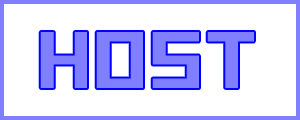
<style>
.page{position:relative;width:300px;height:120px;background:#ffffff}
.page>*{position:absolute;margin:0}
.t1{font:80px "SquareFont";color:#7f7fff;scale:1.2 1}
</style>
<div class="page">
<p class="t1" style="left:40px;top:32px;width:214px;height:56px">HOST</p>
</div>
